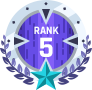
<style>
.page{position:relative;width:92px;height:90px;background:#ffffff}
.page>*{position:absolute;margin:0}
.t1{font:11px "Rajdhani-Bold";color:#ffffff}
.t2{font:30px "Rajdhani-Bold";color:#ffffff}
</style>
<div class="page">
<p class="t1" style="left:34px;top:26px;width:25px;height:8px">RANK</p>
<p class="t2" style="left:39px;top:37px;width:14px;height:20px">5</p>
</div>
